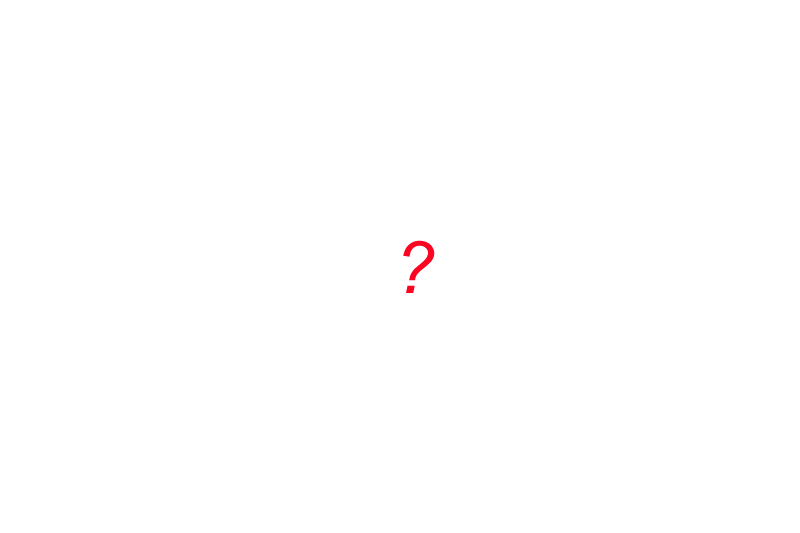
<style>
.page{position:relative;width:800px;height:533px;background:#ffffff}
.page>*{position:absolute;margin:0}
.t1{font:72px "Arial-ItalicMT";letter-spacing:0.05em;color:#fa0522}
</style>
<div class="page">
<p class="t1" style="left:403px;top:240px;width:32px;height:53px">?</p>
</div>
